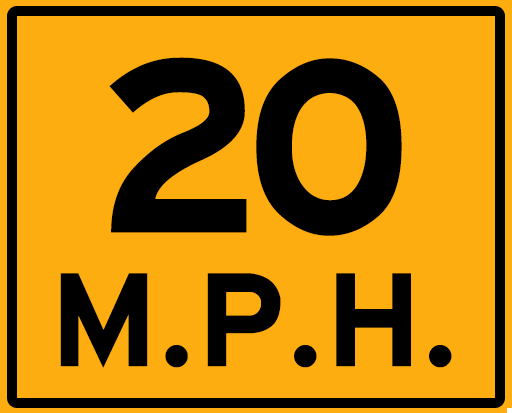
<style>
.page{position:relative;width:512px;height:413px;background:#fead10}
.page>*{position:absolute;margin:0}
.t1{font:259px "HittheRoad";color:#000000}
.t2{font:140.5px "HittheRoad";color:#000000}
</style>
<div class="page">
<p class="t1" style="left:109px;top:57px;width:293px;height:179px">20</p>
<p class="t2" style="left:60px;top:273px;width:392px;height:95px">M.P.H.</p>
</div>
